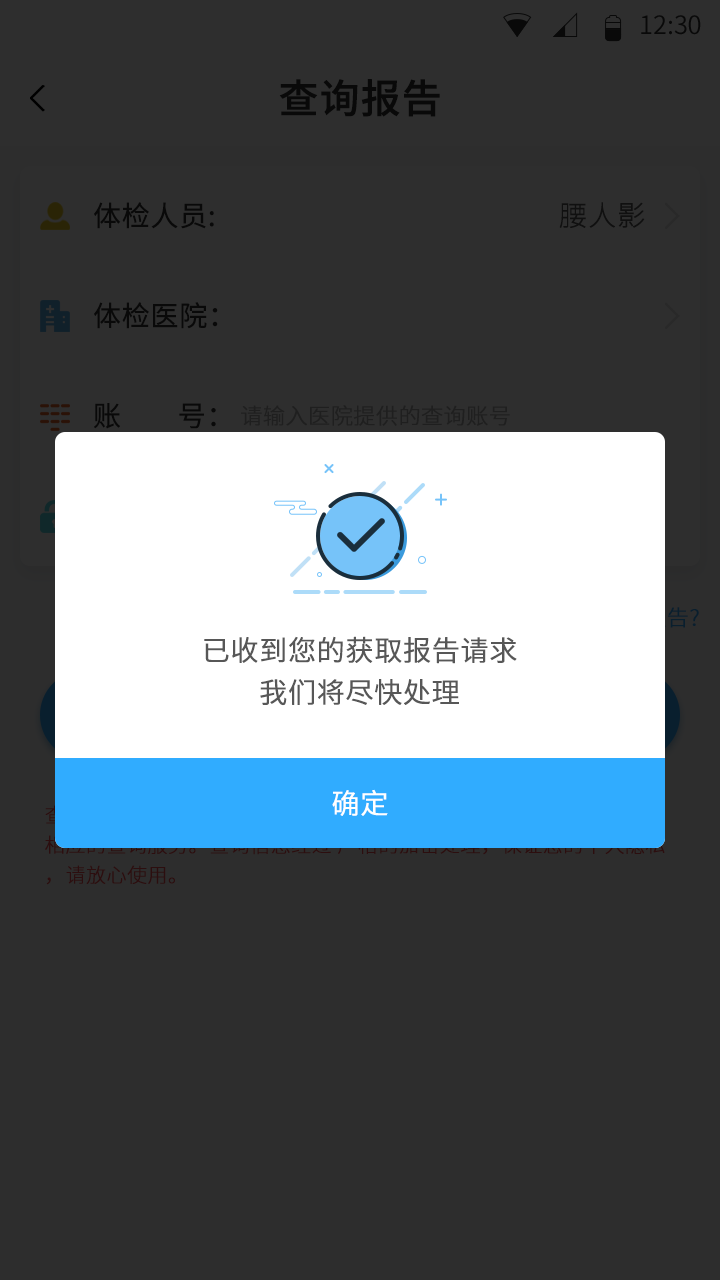
<style>
.page{position:relative;width:720px;height:1280px;background:#2d2d2d}
.page>*{position:absolute;margin:0}
.t1{font:25.4px "SourceHanSansCN-Normal";color:#090909}
.t2{font:40px "SourceHanSansCN-Medium";color:#090909;font-weight:bold}
.t3{font:28px "SourceHanSansCN-Normal";color:#090909;font-weight:bold}
.t4{font:28px "SourceHanSansCN-Light";color:#101010;font-weight:bold}
.t5{font:22px "SourceHanSansCN-Light";color:#1f1f1f;font-weight:bold}
.t6{font:28px/42px "SourceHanSansCN-Normal";color:#575757;font-weight:bold}
.t7{font:28px "SourceHanSansCN-Normal";color:#ffffff;font-weight:bold}
</style>
<div class="page">
<p class="t1" style="left:641px;top:15px;width:60px;height:20px">12:30</p>
<p class="t2" style="left:279px;top:79px;width:161px;height:38px">查询报告</p>
<p class="t3" style="left:94px;top:202px;width:120px;height:27px">体检人员:</p>
<p class="t4" style="left:559px;top:202px;width:86px;height:26px">腰人影</p>
<p class="t3" style="left:94px;top:302px;width:124px;height:27px">体检医院：</p>
<p class="t3" style="left:94px;top:403px;width:122px;height:26px">账        号：</p>
<p class="t5" style="left:241px;top:405px;width:269px;height:21px">请输入医院提供的查询账号</p>
<p class="t6" style="left:204px;top:636px;width:313px;height:70px;text-align:center">已收到您的获取报告请求<br>我们将尽快处理</p>
<p class="t7" style="left:332px;top:789px;width:56px;height:27px">确定</p>
</div>
